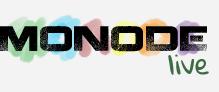
<style>
.page{position:relative;width:219px;height:92px;background:#f3f3f3}
.page>*{position:absolute;margin:0}
.t1{font:34.9px "Coalition";color:#000000}
.t2{font:24.7px "GloriaHallelujah";color:#3d6c43}
</style>
<div class="page">
<p class="t1" style="left:0px;top:26px;width:207px;height:26px">MONODE</p>
<p class="t2" style="left:168px;top:54px;width:41px;height:21px">live</p>
</div>
